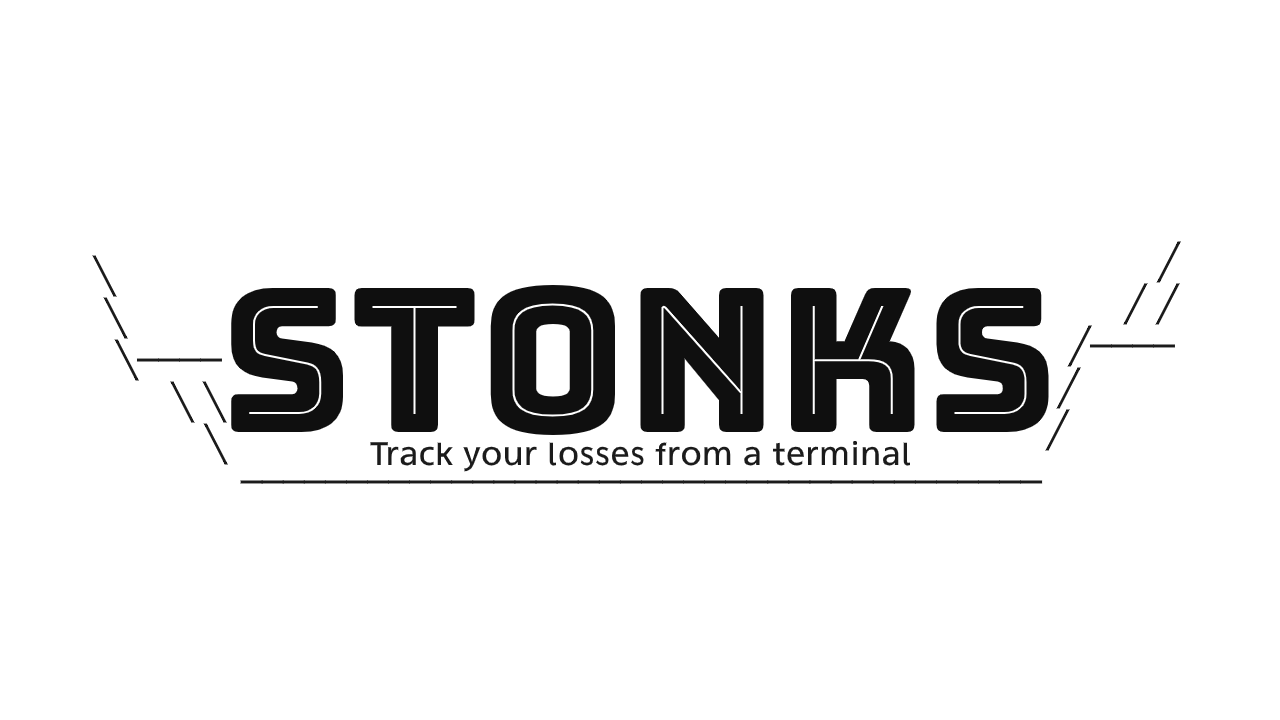
<style>
.page{position:relative;width:1280px;height:720px;background:#ffffff}
.page>*{position:absolute;margin:0}
.t1{font:35px "DejaVuSans";color:#1b1b1b}
.t2{font:200px "Bungee-Inline";color:#000000}
.t3{font:35px "AganS55";color:#1b1b1b}
</style>
<div class="page">
<p class="t1" style="left:1045px;top:241px;width:136px;height:210px">╱ <br>       ╱ ╱  <br>  ╱────     <br> ╱          <br>╱</p>
<p class="t2" style="left:231px;top:285px;width:818px;height:150px;opacity:0.94">Stonks</p>
<p class="t3" style="left:370px;top:440px;width:541px;height:32px">Track your losses from a terminal</p>
<p class="t1" style="left:240px;top:480px;width:803px;height:4px">──────────────────────────────────────</p>
</div>
